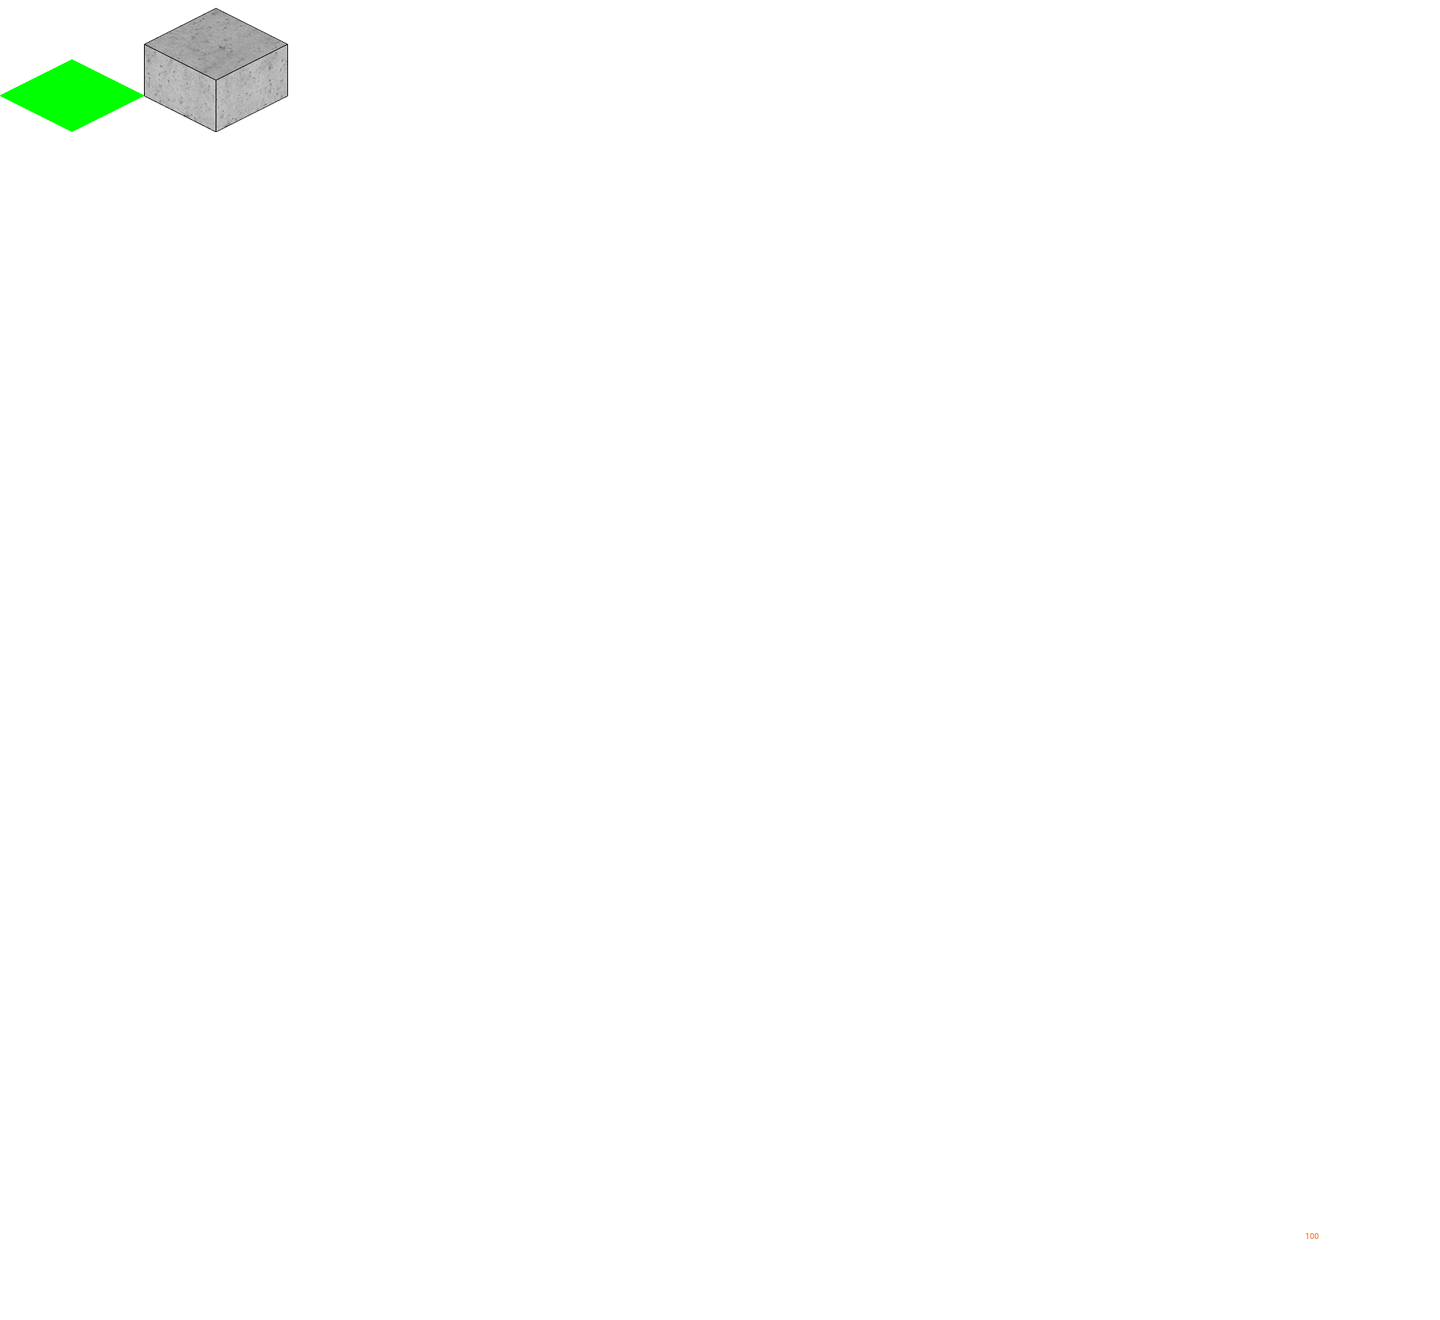
<style>
.page{position:relative;width:1440px;height:1320px;background:#ffffff}
.page>*{position:absolute;margin:0}
.t1{font:9px "MyriadHebrew-Regular";color:#f7894d}
</style>
<div class="page">
<p class="t1" style="left:1306px;top:1233px;width:13px;height:6px">100</p>
</div>
